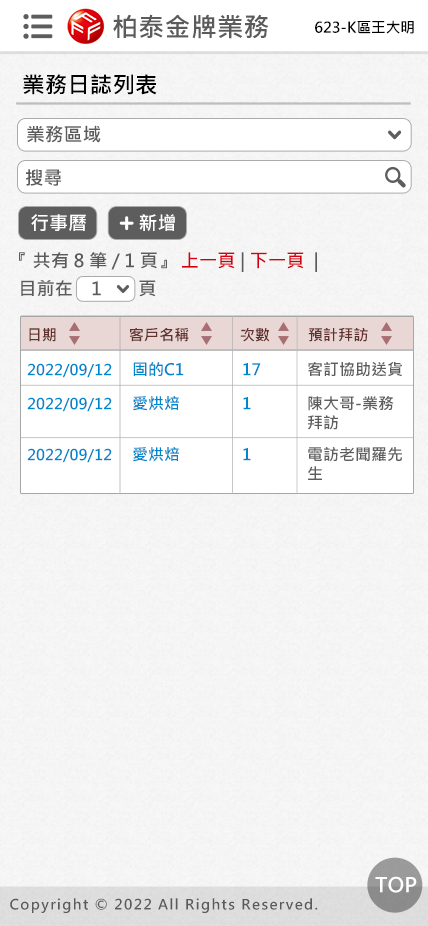
<style>
.page{position:relative;width:428px;height:926px;background:#ffffff}
.page>*{position:absolute;margin:0}
.t1{font:26.5px "MicrosoftJhengHeiBold";color:#5b5b5b}
.t2{font:14.8px "MicrosoftJhengHeiBold";color:#010101}
.t3{font:22.5px "MicrosoftJhengHeiBold";color:#000000}
.t4{font:18.9px "MicrosoftJhengHeiBold";color:#5b5b5b}
.t5{font:19.1px "MicrosoftJhengHeiBold";color:#ffffff}
.t6{font:19.1px "MicrosoftJhengHeiBold";color:#fefefe}
.t7{font:18.1px "MicrosoftJhengHeiBold";color:#5b5b5b}
.t8{font:18.1px "MicrosoftJhengHeiBold";color:#d3000f}
.t9{font:18.1px "MicrosoftJhengHeiBold";color:#d40010}
.t10{font:15.3px "MicrosoftJhengHeiBold";color:#62302d}
.t11{font:15.1px "MicrosoftJhengHeiBold";color:#0086cc}
.t12{font:16px "MicrosoftJhengHeiBold";color:#0086cc}
.t13{font:16px "MicrosoftJhengHeiBold";color:#5d5d5d}
.t14{font:20.3px "MicrosoftJhengHeiBold";color:#ffffff}
.t15{font:14px "MicrosoftJhengHeiBold";letter-spacing:0.1em;color:#5a5a5a}
</style>
<div class="page">
<p class="t1" style="left:113px;top:14px;width:156px;height:25px">柏泰金牌業務</p>
<p class="t2" style="left:315px;top:20px;width:99px;height:14px">623-K區王大明</p>
<p class="t3" style="left:23px;top:74px;width:134px;height:21px">業務日誌列表</p>
<p class="t4" style="left:27px;top:125px;width:74px;height:18px">業務區域</p>
<p class="t4" style="left:26px;top:169px;width:35px;height:17px">搜尋</p>
<p class="t5" style="left:31px;top:214px;width:55px;height:17px">行事曆</p>
<p class="t6" style="left:139px;top:214px;width:36px;height:17px">新增</p>
<p class="t7" style="left:19px;top:252px;width:298px;height:20px">『 共有 8 筆 / 1 頁』 <span class="t8">上一頁</span> | <span class="t9">下一頁</span>  |</p>
<p class="t7" style="left:21px;top:280px;width:135px;height:17px">目前在    1        頁</p>
<p class="t10" style="left:29px;top:328px;width:27px;height:14px">日期</p>
<p class="t10" style="left:130px;top:327px;width:59px;height:15px">客戶名稱</p>
<p class="t10" style="left:240px;top:327px;width:30px;height:15px">次數</p>
<p class="t10" style="left:308px;top:327px;width:60px;height:15px">預計拜訪</p>
<p class="t11" style="left:27px;top:363px;width:85px;height:15px">2022/09/12</p>
<p class="t12" style="left:133px;top:362px;width:51px;height:14px">固的C1</p>
<p class="t12" style="left:243px;top:363px;width:18px;height:13px">17</p>
<p class="t13" style="left:308px;top:362px;width:94px;height:15px">客訂協助送貨</p>
<p class="t11" style="left:27px;top:397px;width:85px;height:15px">2022/09/12</p>
<p class="t12" style="left:133px;top:396px;width:46px;height:15px">愛烘焙</p>
<p class="t12" style="left:243px;top:397px;width:8px;height:13px">1</p>
<p class="t13" style="left:308px;top:396px;width:86px;height:34px">陳大哥-業務<br>拜訪</p>
<p class="t11" style="left:27px;top:448px;width:85px;height:15px">2022/09/12</p>
<p class="t12" style="left:133px;top:447px;width:46px;height:15px">愛烘焙</p>
<p class="t12" style="left:243px;top:448px;width:8px;height:13px">1</p>
<p class="t13" style="left:308px;top:447px;width:94px;height:33px">電訪老聞羅先<br>生</p>
<p class="t14" style="left:375px;top:876px;width:42px;height:17px">TOP</p>
<p class="t15" style="left:10px;top:898px;width:308px;height:15px">Copyright © 2022 All Rights Reserved.</p>
</div>
